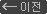
<style>
.page{position:relative;width:47px;height:14px;background:#404040}
.page>*{position:absolute;margin:0}
.t1{font:16px "Dotum";color:#bababa;font-weight:bold}
.t2{font:11px "Dotum";color:#bababa}
</style>
<div class="page">
<p class="t1" style="left:2px;top:3px;width:15px;height:7px">←</p>
<p class="t2" style="left:21px;top:2px;width:19px;height:10px">이전</p>
</div>
